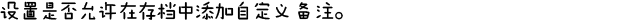
<style>
.page{position:relative;width:625px;height:21px;background:#ffffff}
.page>*{position:absolute;margin:0}
.t1{font:22px "¢è?";color:#000000}
</style>
<div class="page">
<p class="t1" style="left:0px;top:1px;width:343px;height:19px">设置是否允许在存档中添加自定义备注。</p>
</div>
